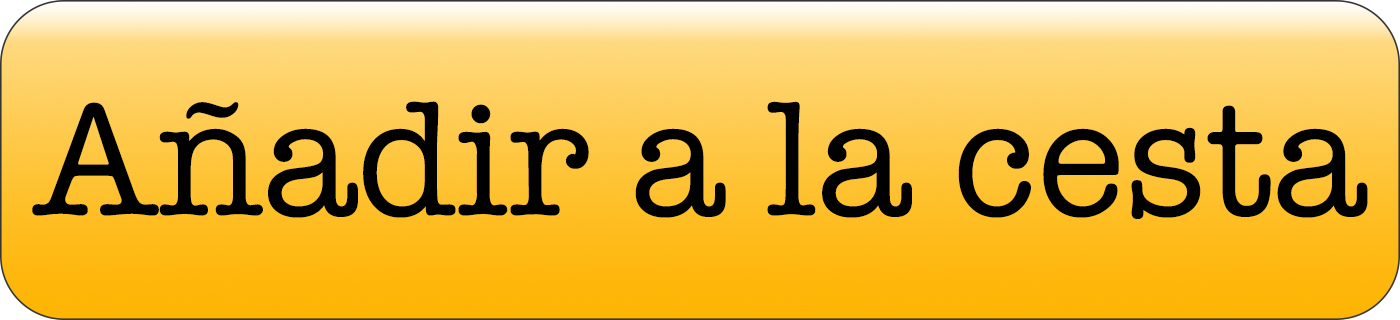
<style>
.page{position:relative;width:1400px;height:320px}
.page>*{position:absolute;margin:0}
.t1{font:166px "AmericanTypewriter";color:#000000}
</style>
<div class="page">
<p class="t1" style="left:32px;top:101px;width:1336px;height:118px">Añadir a la cesta</p>
</div>
